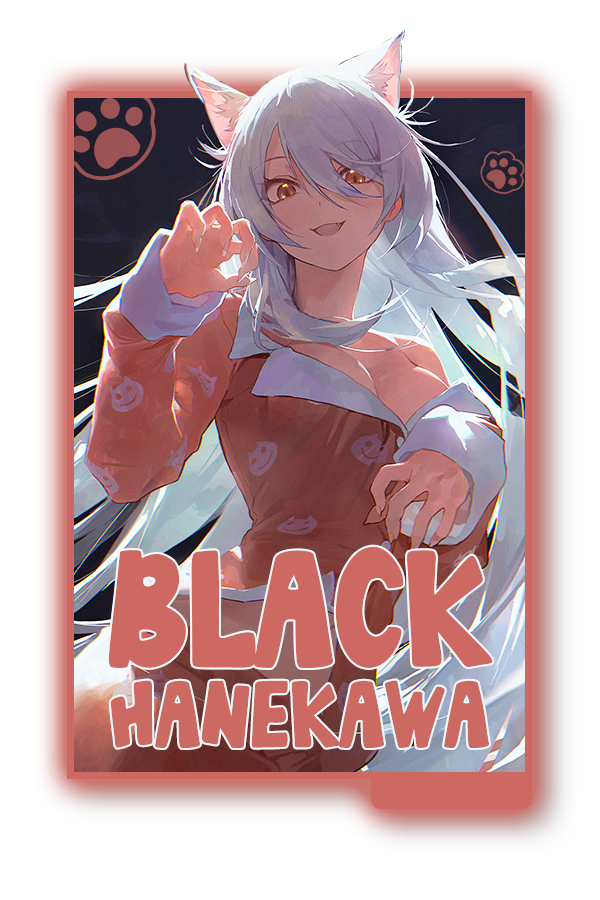
<style>
.page{position:relative;width:600px;height:900px;background:#ffffff}
.page>*{position:absolute;margin:0}
.t1{font:168.9px "LittlePawsRegular";color:#cd6962}
.t2{font:96.5px "LittlePawsRegular";color:#cc6962}
</style>
<div class="page">
<p class="t1" style="left:108px;top:546px;width:385px;height:122px">BLACK</p>
<p class="t2" style="left:110px;top:680px;width:379px;height:68px">HANEKAWA</p>
</div>
